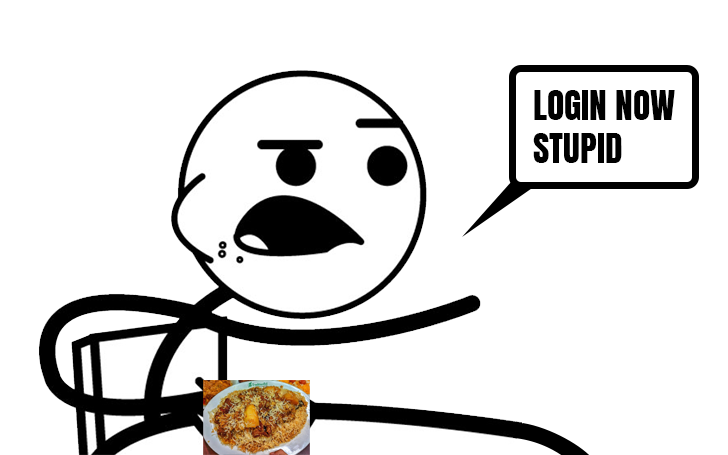
<style>
.page{position:relative;width:728px;height:455px;background:#ffffff}
.page>*{position:absolute;margin:0}
.t1{font:35.4px "Anton-Regular";color:#000000}
</style>
<div class="page">
<p class="t1" style="left:533px;top:90px;width:142px;height:73px">LOGIN NOW<br>STUPID</p>
</div>
